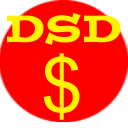
<style>
.page{position:relative;width:128px;height:128px;background:#fc0000}
.page>*{position:absolute;margin:0}
.t1{font:38.2px "PostinoStd";color:#fff100}
.t2{font:75px "DokChampa";color:#fff100}
</style>
<div class="page">
<p class="t1" style="left:7px;top:12px;width:114px;height:33px">DSD</p>
<p class="t2" style="left:43px;top:53px;width:37px;height:67px">$</p>
</div>
